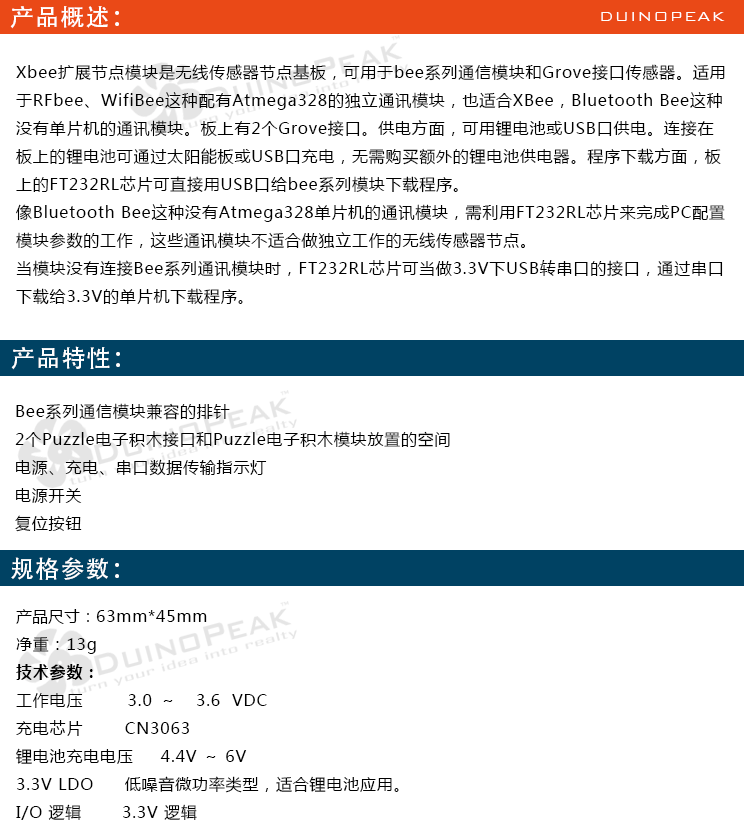
<style>
.page{position:relative;width:744px;height:833px;background:#ffffff}
.page>*{position:absolute;margin:0}
.t1{font:24px "AdobeHeitiStd-Regular";letter-spacing:0.05em;color:#ffffff}
.t2{font:18px "BankGothicBT-Light";letter-spacing:0.05em;color:#ffffff}
.t3{font:16px "MicrosoftYaHei";letter-spacing:0.05em;color:#000000}
.t4{font:16px "MicrosoftYaHei";color:#000000}
.t5{font:16px "MicrosoftYaHei-Bold";letter-spacing:0.05em;color:#000000}
</style>
<div class="page">
<p class="t1" style="left:10px;top:6px;width:109px;height:23px">产品概述：</p>
<p class="t2" style="left:601px;top:12px;width:124px;height:9px">DUINOPEAK</p>
<p class="t3" style="left:16px;top:64px;width:709px;height:241px">Xbee扩展节点模块是无线传感器节点基板，可用于bee系列通信模块和Grove接口传感器。适用<br>于RFbee、WifiBee这种配有Atmega328的独立通讯模块，也适合XBee，Bluetooth Bee这种<br>没有单片机的通讯模块。板上有2个Grove接口。供电方面，可用锂电池或USB口供电。连接在<br>板上的锂电池可通过太阳能板或USB口充电，无需购买额外的锂电池供电器。程序下载方面，板<br>上的FT232RL芯片可直接用USB口给bee系列模块下载程序。<br>像Bluetooth Bee这种没有Atmega328单片机的通讯模块，需利用FT232RL芯片来完成PC配置<br>模块参数的工作，这些通讯模块不适合做独立工作的无线传感器节点。<br>当模块没有连接Bee系列通讯模块时，FT232RL芯片可当做3.3V下USB转串口的接口，通过串口<br>下载给3.3V的单片机下载程序。</p>
<p class="t1" style="left:11px;top:346px;width:109px;height:24px">产品特性：</p>
<p class="t3" style="left:15px;top:403px;width:435px;height:129px">Bee系列通信模块兼容的排针<br>2个Puzzle电子积木接口和Puzzle电子积木模块放置的空间<br>电源、充电、串口数据传输指示灯<br>电源开关<br>复位按钮</p>
<p class="t1" style="left:11px;top:557px;width:108px;height:23px">规格参数：</p>
<p class="t3" style="left:16px;top:609px;width:383px;height:211px"><span class="t4">产品尺寸：</span>63mm*45mm<br>净重：13g<br><span class="t5">技术参数：<br></span>工作电压        3.0 ～ 3.6 VDC<br>充电芯片   CN3063<br>锂电池充电电压 4.4V ～ 6V<br>3.3V LDO 低噪音微功率类型，适合锂电池应用。<br>I/O 逻辑       3.3V 逻辑</p>
</div>
